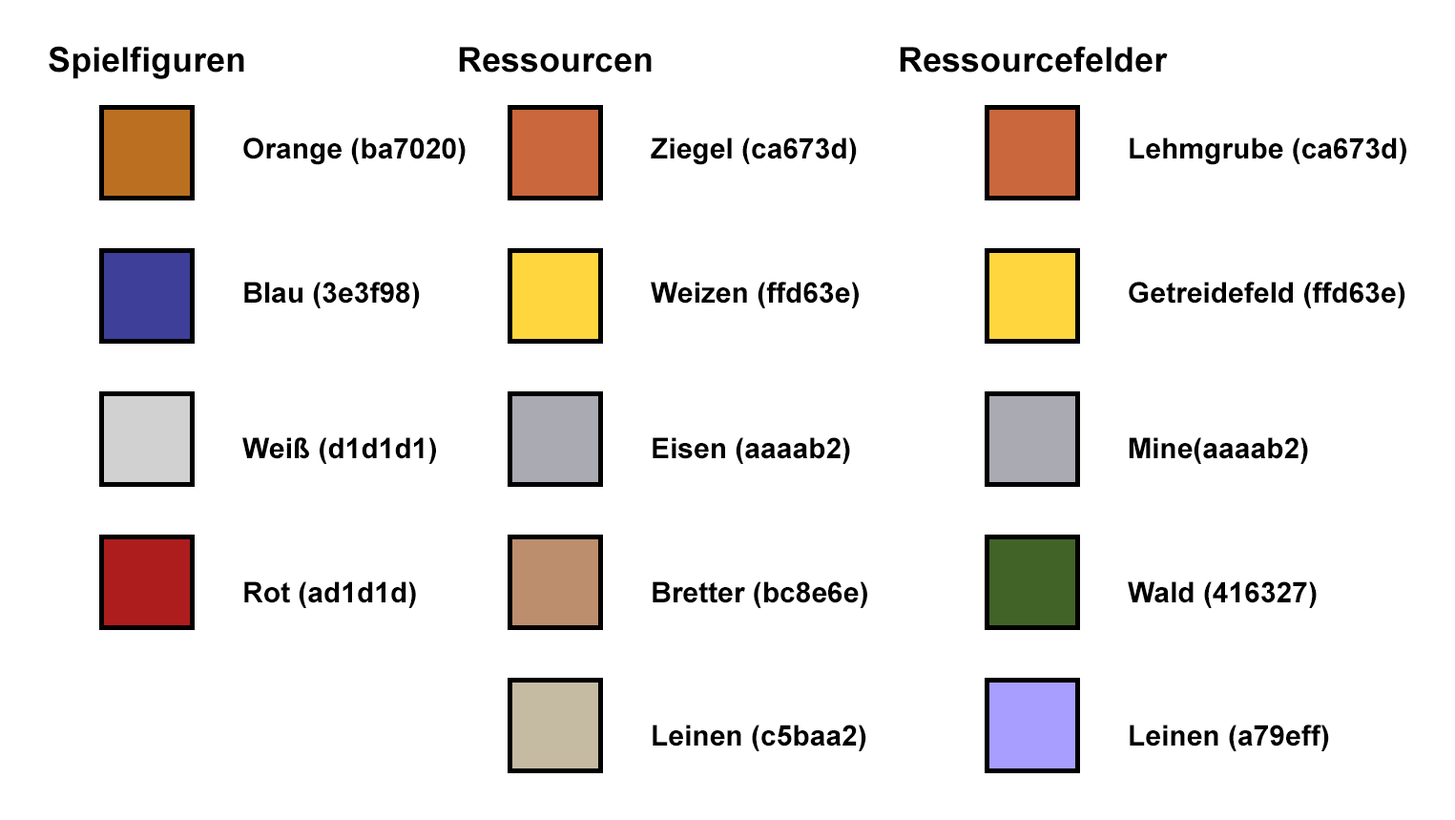
<style>
.page{position:relative;width:1455px;height:820px;background:#ffffff}
.page>*{position:absolute;margin:0}
.t1{font:34.3px "Arial-BoldMT";color:#000000}
.t2{font:28.6px "Arial-BoldMT";color:#000000}
</style>
<div class="page">
<p class="t1" style="left:49px;top:46px;width:195px;height:33px">Spielfiguren</p>
<p class="t1" style="left:459px;top:47px;width:193px;height:26px">Ressourcen</p>
<p class="t1" style="left:900px;top:46px;width:268px;height:27px">Ressourcefelder</p>
<p class="t2" style="left:243px;top:137px;width:223px;height:28px">Orange (ba7020)</p>
<p class="t2" style="left:651px;top:137px;width:206px;height:28px">Ziegel (ca673d)</p>
<p class="t2" style="left:1130px;top:137px;width:276px;height:28px">Lehmgrube (ca673d)</p>
<p class="t2" style="left:244px;top:281px;width:176px;height:27px">Blau (3e3f98)</p>
<p class="t2" style="left:651px;top:281px;width:208px;height:27px">Weizen (ffd63e)</p>
<p class="t2" style="left:1129px;top:281px;width:276px;height:27px">Getreidefeld (ffd63e)</p>
<p class="t2" style="left:242px;top:437px;width:194px;height:27px">Weiß (d1d1d1)</p>
<p class="t2" style="left:653px;top:437px;width:197px;height:27px">Eisen (aaaab2)</p>
<p class="t2" style="left:1129px;top:437px;width:179px;height:27px">Mine(aaaab2)</p>
<p class="t2" style="left:244px;top:581px;width:172px;height:27px">Rot (ad1d1d)</p>
<p class="t2" style="left:653px;top:581px;width:214px;height:27px">Bretter (bc8e6e)</p>
<p class="t2" style="left:1128px;top:581px;width:189px;height:27px">Wald (416327)</p>
<p class="t2" style="left:653px;top:724px;width:213px;height:27px">Leinen (c5baa2)</p>
<p class="t2" style="left:1130px;top:724px;width:199px;height:27px">Leinen (a79eff)</p>
</div>
